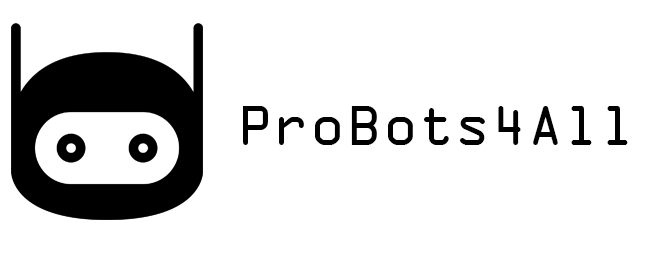
<style>
.page{position:relative;width:646px;height:253px;background:#ffffff}
.page>*{position:absolute;margin:0}
.t1{font:60px "OCRAExtended";color:#000000}
</style>
<div class="page">
<p class="t1" style="left:243px;top:106px;width:385px;height:39px">ProBots4All</p>
</div>
